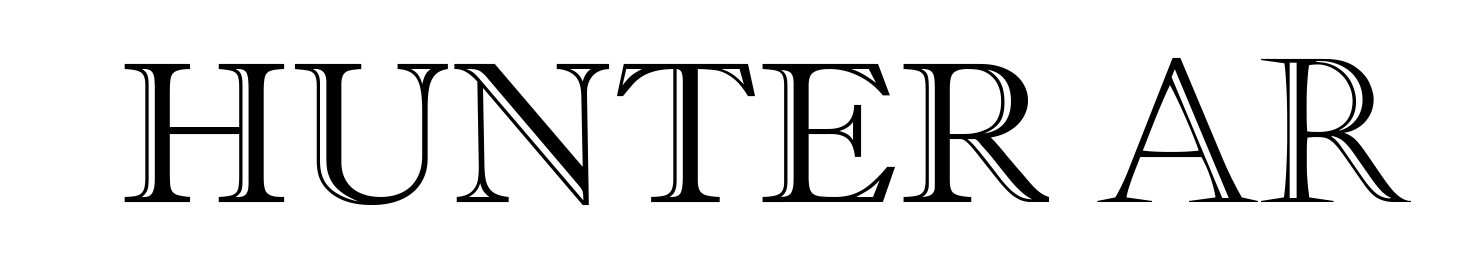
<style>
.page{position:relative;width:1460px;height:276px;background:#ffffff}
.page>*{position:absolute;margin:0}
.t1{font:200px "ImprintMT-Shadow";color:#000000}
</style>
<div class="page">
<p class="t1" style="left:124px;top:63px;width:925px;height:143px">HUNTER</p>
</div>
